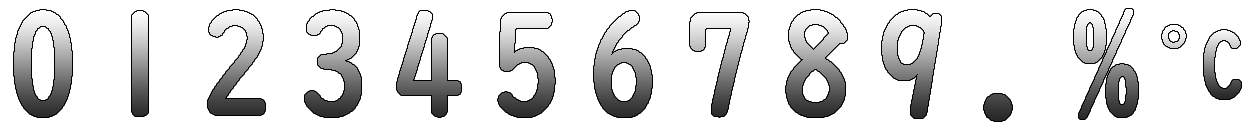
<style>
.page{position:relative;width:1248px;height:128px;background:#ffffff}
.page>*{position:absolute;margin:0}
.t1{font:140px "UDDigiKyokashoN-B";letter-spacing:0.19em}
.t2{font:90px "UDDigiKyokashoN-B";letter-spacing:-0.54em}
</style>
<div class="page">
<p class="t1" style="left:14px;top:9px;width:1124px;height:112px">0123456789.%</p>
<p class="t2" style="left:1162px;top:25px;width:79px;height:74px">°C</p>
</div>
